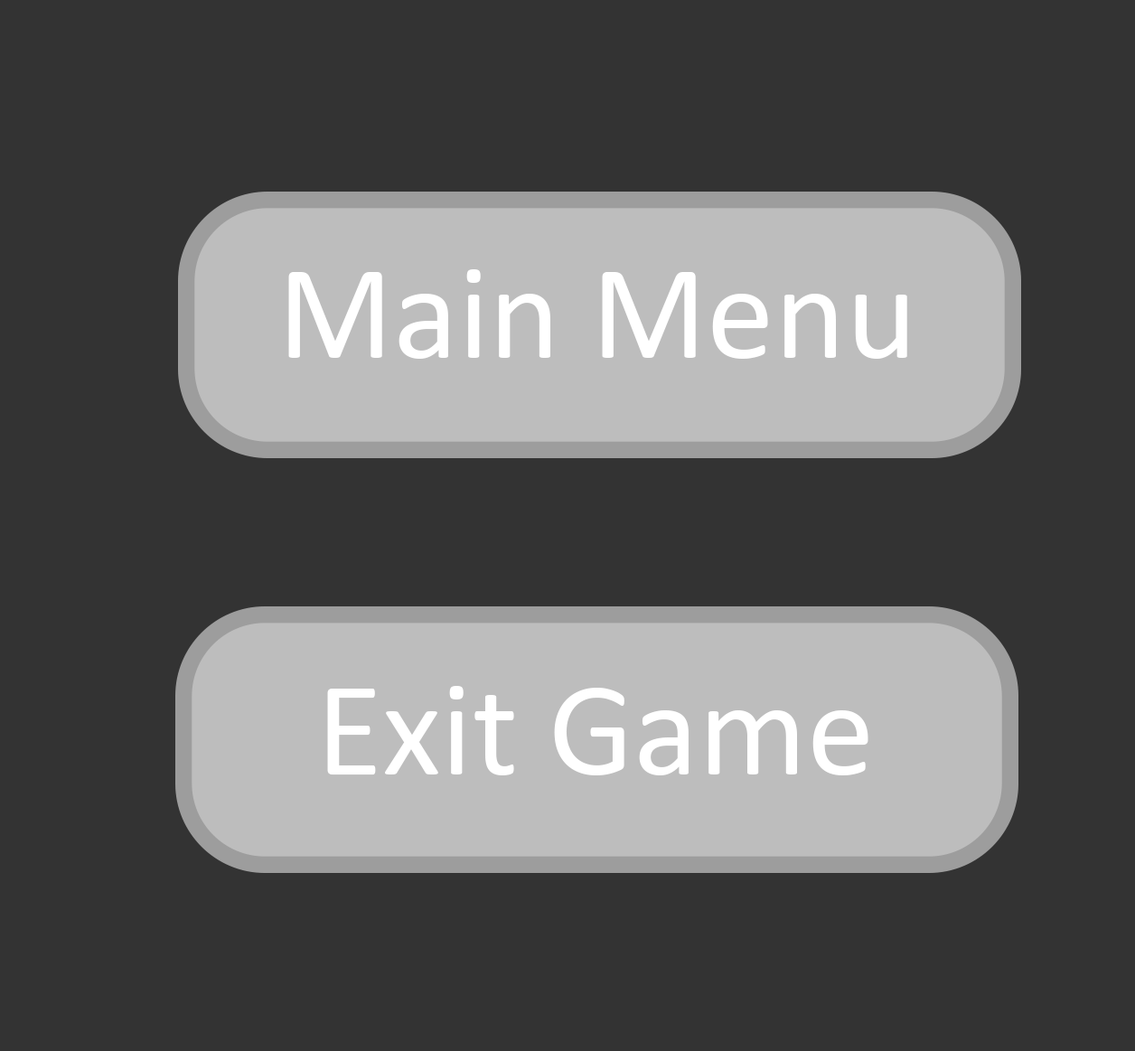
<style>
.page{position:relative;width:1135px;height:1051px;background:#333333}
.page>*{position:absolute;margin:0}
.t1{font:135.5px "Calibri";color:#ffffff}
</style>
<div class="page">
<p class="t1" style="left:288px;top:269px;width:619px;height:90px">Main Menu</p>
<p class="t1" style="left:327px;top:686px;width:541px;height:89px">Exit Game</p>
</div>
